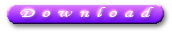
<style>
.page{position:relative;width:172px;height:32px}
.page>*{position:absolute;margin:0}
.t1{font:14px "MonotypeCorsiva";letter-spacing:0.35em;color:#ffffff;scale:1.5 1}
</style>
<div class="page">
<p class="t1" style="left:20px;top:7px;width:134px;height:10px">Download</p>
</div>
